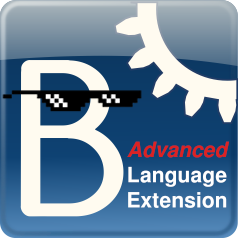
<style>
.page{position:relative;width:238px;height:238px}
.page>*{position:absolute;margin:0}
.t1{font:21px "FreeSansBold";color:#ffffff}
.t2{font:21px "FreeSansBoldOblique";color:#dc2222}
</style>
<div class="page">
<p class="t1" style="left:126px;top:141px;width:105px;height:68px;text-align:center"><span class="t2">Advanced<br></span>Language<br>Extension</p>
</div>
